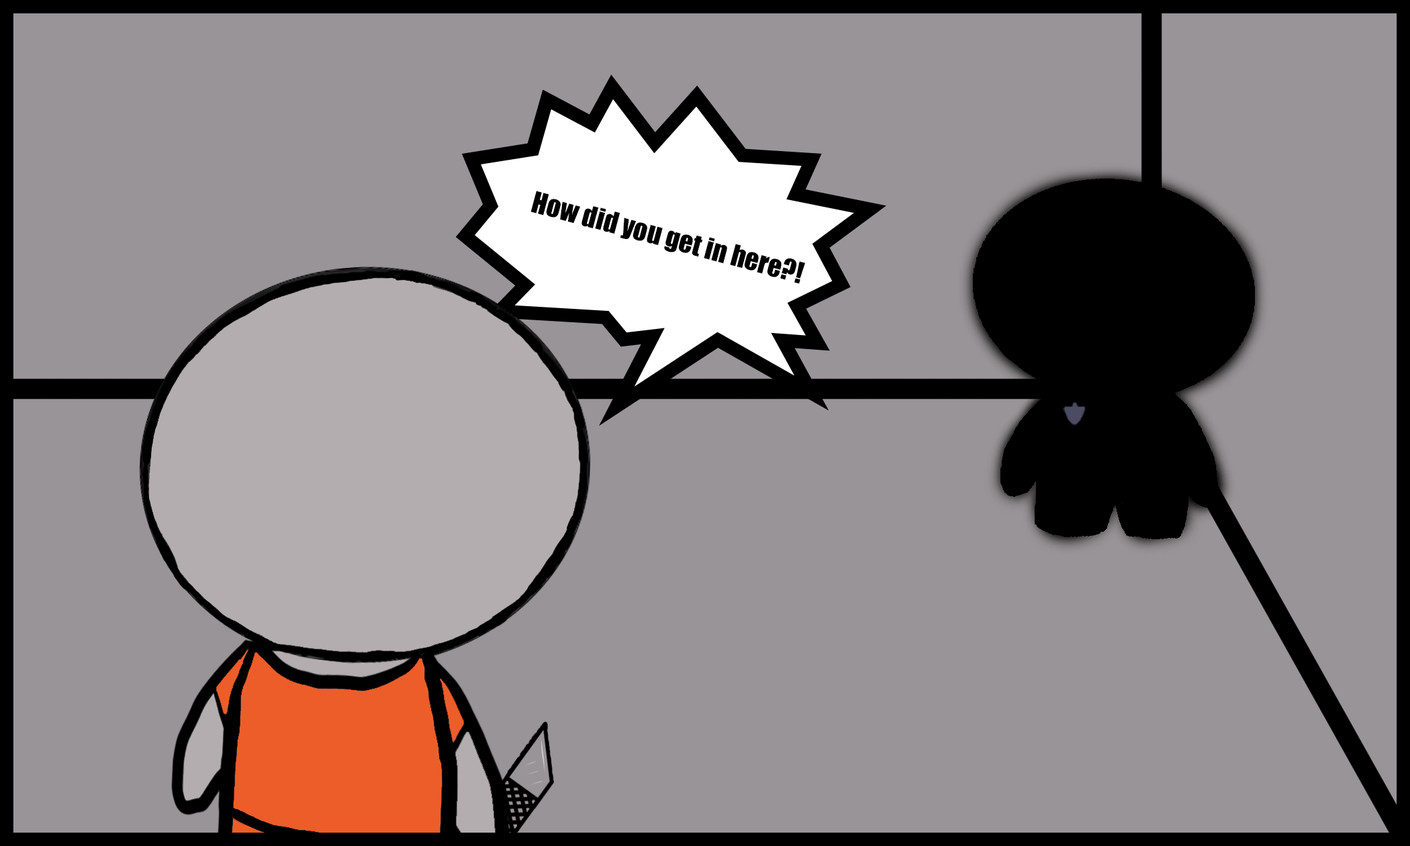
<style>
.page{position:relative;width:1410px;height:846px;background:#999497}
.page>*{position:absolute;margin:0}
.t1{font:27.3px "Impact";color:#000000}
</style>
<div class="page">
<p class="t1" style="left:530px;top:191px;width:276px;height:93px;rotate:15deg">How did you get in here?!</p>
</div>
